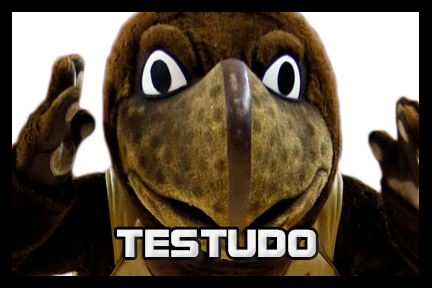
<style>
.page{position:relative;width:432px;height:288px}
.page>*{position:absolute;margin:0}
.t1{font:41.7px "BolsterBold";color:#f3f3f3}
</style>
<div class="page">
<p class="t1" style="left:117px;top:229px;width:199px;height:28px">TESTUDO</p>
</div>
